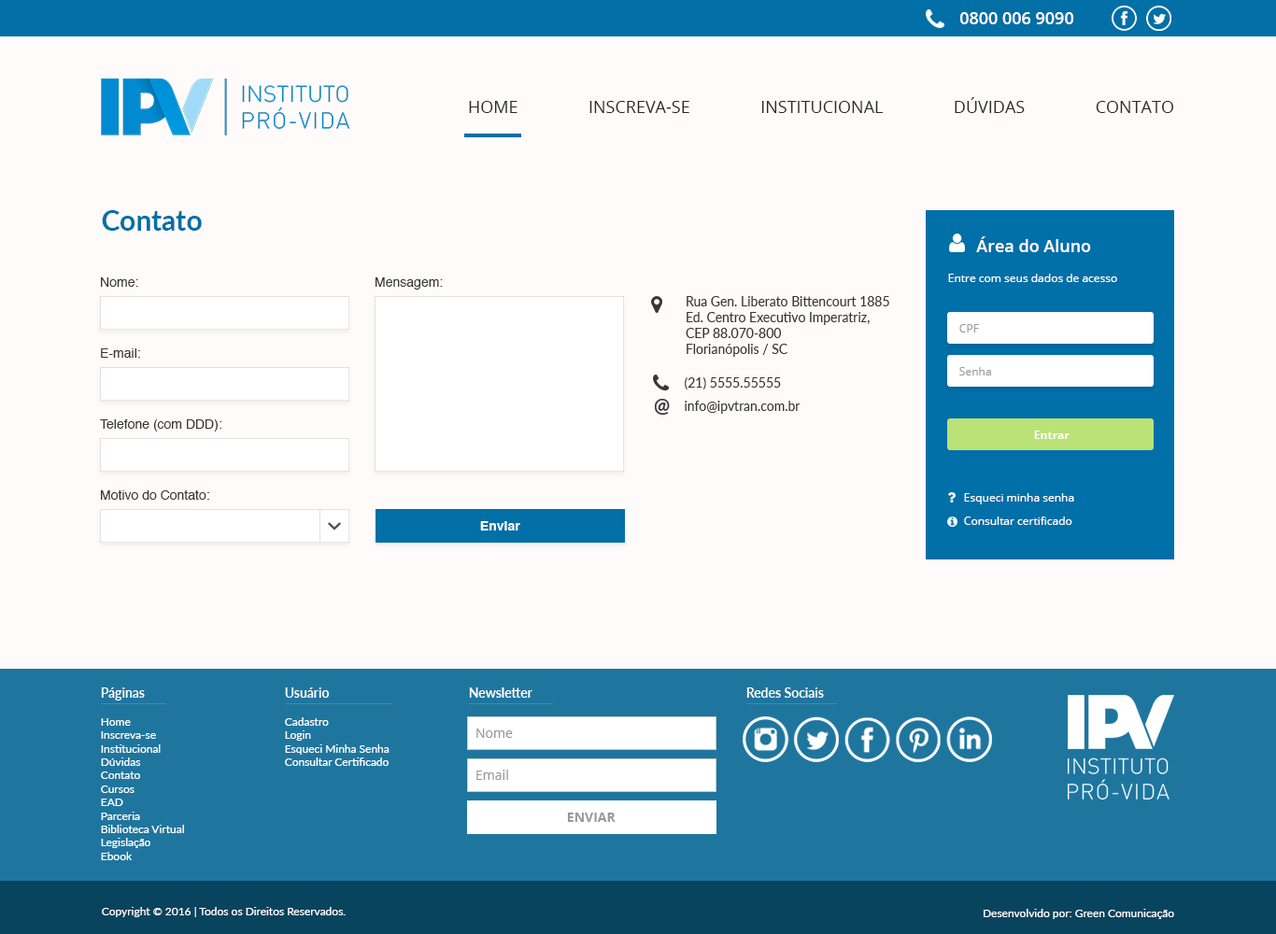
<style>
.page{position:relative;width:1276px;height:934px;background:#fffbfb}
.page>*{position:absolute;margin:0}
.t1{font:16.8px "OpenSans-Semibold";color:#ffffff}
.t2{font:16.8px "OpenSans";color:#2a2a2a}
.t3{font:28px "Lato-Bold";color:#026fa7}
.t4{font:13.1px "Helvetica";color:#363636}
.t5{font:11.2px "OpenSans";color:#ffffff}
.t6{font:13.1px "Lato-Regular";color:#363636}
.t7{font:11.2px "OpenSans";color:#9c9c9c}
.t8{font:11.2px "OpenSans-Bold";color:#ffffff}
.t9{font:13.1px "Helvetica-Bold";color:#ffffff}
.t10{font:13.1px "Lato-Semibold";color:#ffffff}
.t11{font:11.2px "Lato-Regular";color:#ffffff}
.t12{font:13.1px "OpenSans";color:#999999}
.t13{font:13.1px "OpenSans-Bold";color:#999999}
</style>
<div class="page">
<p class="t1" style="left:960px;top:12px;width:114px;height:12px">0800 006 9090</p>
<p class="t2" style="left:469px;top:97px;width:704px;height:16px">HOME INSCREVA-SE INSTITUCIONAL DÚVIDAS CONTATO</p>
<p class="t3" style="left:102px;top:210px;width:100px;height:21px">Contato</p>
<p class="t1" style="left:976px;top:236px;width:115px;height:16px">Área do Aluno</p>
<p class="t4" style="left:101px;top:277px;width:37px;height:10px">Nome:</p>
<p class="t4" style="left:376px;top:277px;width:67px;height:13px">Mensagem:</p>
<p class="t5" style="left:948px;top:274px;width:169px;height:8px">Entre com seus dados de acesso</p>
<p class="t6" style="left:686px;top:296px;width:203px;height:61px">Rua Gen. Liberato Bittencourt 1885<br>Ed. Centro Executivo Imperatriz, <br>CEP 88.070-800<br>Florianópolis / SC</p>
<p class="t7" style="left:960px;top:324px;width:19px;height:9px">CPF</p>
<p class="t4" style="left:101px;top:348px;width:39px;height:10px">E-mail:</p>
<p class="t6" style="left:685px;top:377px;width:96px;height:13px">(21) 5555.55555</p>
<p class="t7" style="left:960px;top:367px;width:31px;height:9px">Senha</p>
<p class="t6" style="left:685px;top:401px;width:116px;height:13px">info@ipvtran.com.br</p>
<p class="t4" style="left:100px;top:420px;width:122px;height:12px">Telefone (com DDD):</p>
<p class="t8" style="left:1034px;top:431px;width:36px;height:8px">Entrar</p>
<p class="t4" style="left:101px;top:491px;width:108px;height:9px">Motivo do Contato:</p>
<p class="t5" style="left:964px;top:493px;width:110px;height:12px">Esqueci minha senha</p>
<p class="t9" style="left:480px;top:521px;width:40px;height:10px">Enviar</p>
<p class="t5" style="left:964px;top:517px;width:109px;height:8px">Consultar certificado</p>
<p class="t10" style="left:101px;top:688px;width:44px;height:13px">Páginas</p>
<p class="t10" style="left:285px;top:688px;width:44px;height:10px">Usuário</p>
<p class="t10" style="left:469px;top:688px;width:64px;height:10px">Newsletter</p>
<p class="t10" style="left:747px;top:688px;width:77px;height:10px">Redes Sociais</p>
<p class="t11" style="left:101px;top:718px;width:83px;height:143px">Home<br>Inscreva-se<br>Institucional<br>Dúvidas<br>Contato<br>Cursos<br>EAD<br>Parceria<br>Biblioteca Virtual<br>Legislação<br>Ebook</p>
<p class="t11" style="left:285px;top:718px;width:105px;height:48px">Cadastro<br>Login<br>Esqueci Minha Senha<br>Consultar Certificado</p>
<p class="t12" style="left:476px;top:729px;width:37px;height:9px">Nome</p>
<p class="t12" style="left:476px;top:770px;width:32px;height:10px">Email</p>
<p class="t13" style="left:567px;top:813px;width:49px;height:9px">ENVIAR</p>
<p class="t11" style="left:102px;top:907px;width:244px;height:10px">Copyright © 2016 | Todos os Direitos Reservados.</p>
<p class="t11" style="left:984px;top:909px;width:190px;height:10px">Desenvolvido por: Green Comunicação</p>
</div>
